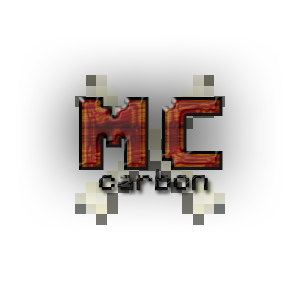
<style>
.page{position:relative;width:300px;height:300px;background:#ffffff}
.page>*{position:absolute;margin:0}
.t1{font:72px "MineCrafter-2.0";font-weight:bold}
.t2{font:24px "Minecraftia";font-weight:bold}
</style>
<div class="page">
<p class="t1" style="left:79px;top:97px;width:144px;height:73px">MC</p>
<p class="t2" style="left:99px;top:169px;width:109px;height:22px">carbon</p>
</div>
